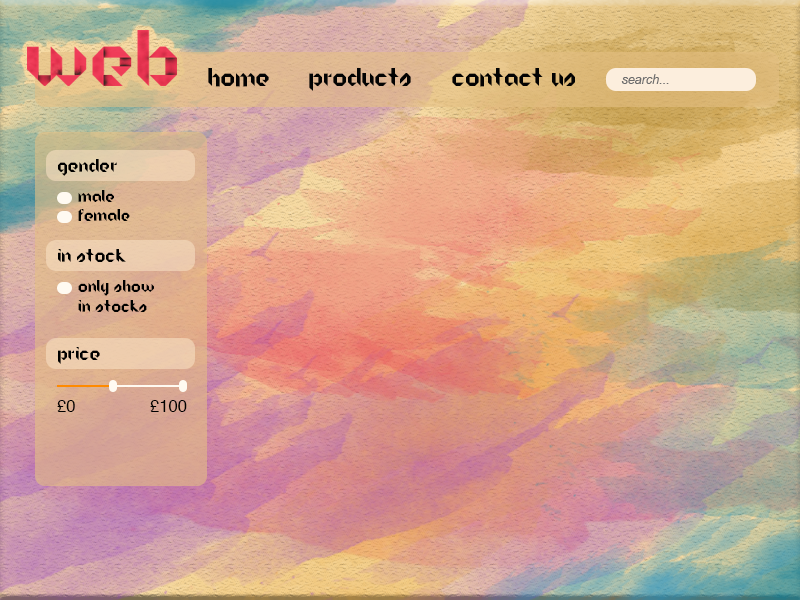
<style>
.page{position:relative;width:800px;height:600px}
.page>*{position:absolute;margin:0}
.t1{font:25px "Origram";color:#030303}
.t2{font:12.5px "Arial-ItalicMT";color:#6d6d6d}
.t3{font:18.8px "Origram";color:#000000}
.t4{font:16.7px "Origram";color:#000000}
.t5{font:16.7px "Helvetica";color:#000000}
</style>
<div class="page">
<p class="t1" style="left:208px;top:68px;width:61px;height:19px">Home</p>
<p class="t1" style="left:309px;top:68px;width:102px;height:23px">Products</p>
<p class="t1" style="left:452px;top:68px;width:123px;height:19px">Contact Us</p>
<p class="t2" style="left:621px;top:74px;width:48px;height:10px">search...</p>
<p class="t3" style="left:58px;top:159px;width:59px;height:17px">Gender</p>
<p class="t4" style="left:78px;top:190px;width:36px;height:12px">male</p>
<p class="t4" style="left:78px;top:209px;width:52px;height:12px">Female</p>
<p class="t3" style="left:58px;top:249px;width:68px;height:13px">In Stock</p>
<p class="t4" style="left:78px;top:280px;width:76px;height:32px">Only show in stocks</p>
<p class="t3" style="left:58px;top:347px;width:42px;height:17px">Price</p>
<p class="t5" style="left:57px;top:400px;width:18px;height:12px">£0</p>
<p class="t5" style="left:150px;top:400px;width:37px;height:12px">£100</p>
</div>
